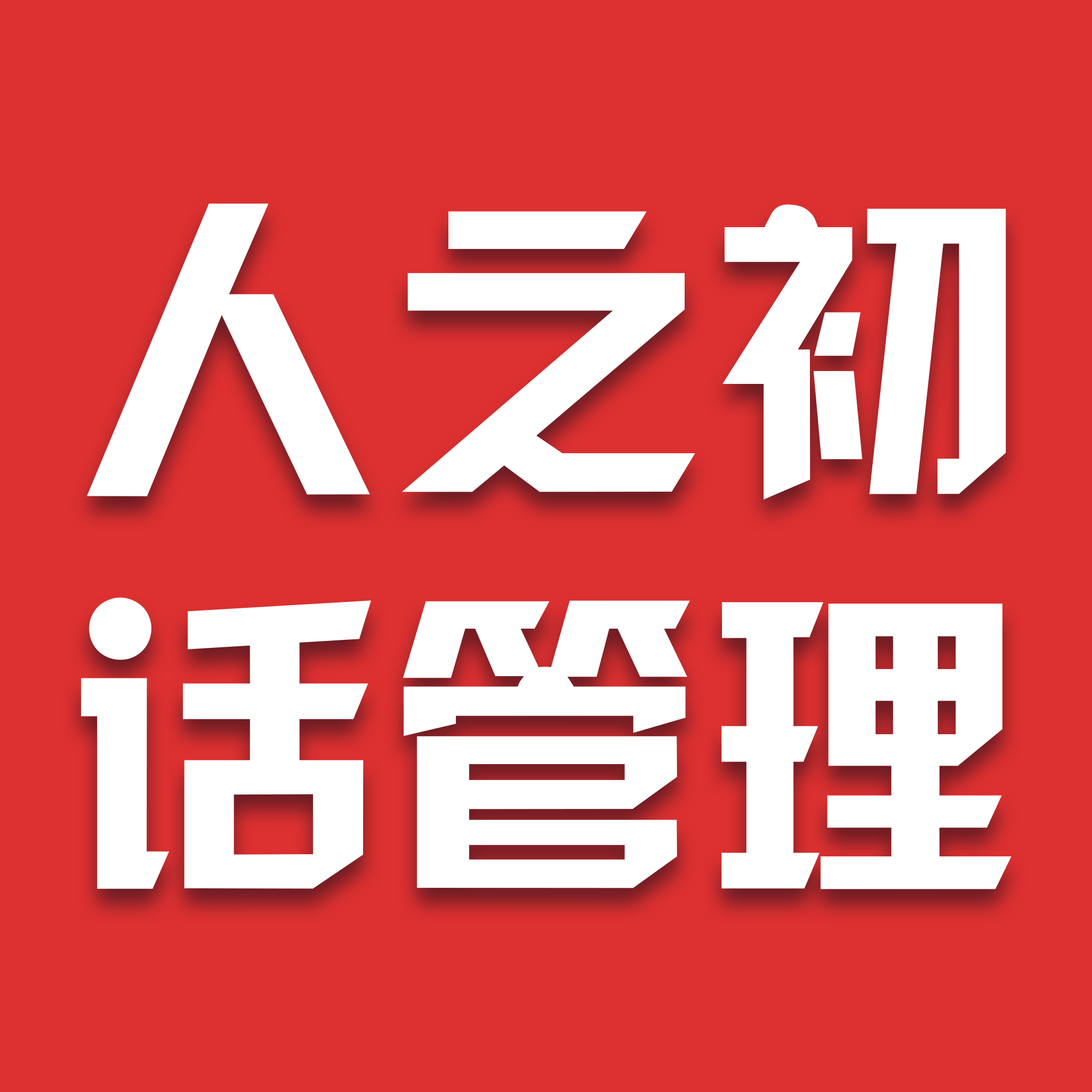
<style>
.page{position:relative;width:1092px;height:1092px;background:#dd3030}
.page>*{position:absolute;margin:0}
.t1{font:319.9px "HYk2gj";color:#ffffff}
</style>
<div class="page">
<p class="t1" style="left:87px;top:203px;width:919px;height:297px">人之初</p>
<p class="t1" style="left:81px;top:597px;width:930px;height:292px">话管理</p>
</div>
